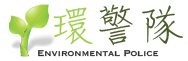
<style>
.page{position:relative;width:188px;height:61px;background:#ffffff}
.page>*{position:absolute;margin:0}
.t1{font:48px "DFYa-W3-WINP-BF";letter-spacing:-0.01em;color:#4b5c29}
.t2{font:48px "DFYa-W3-WINP-BF";letter-spacing:-0.01em;color:#a1cd4b}
.t3{font:11px "Copperplate";letter-spacing:-0.01em;color:#2e2e2e}
</style>
<div class="page">
<p class="t1" style="left:99px;top:4px;width:84px;height:42px">警隊</p>
<p class="t2" style="left:53px;top:7px;width:40px;height:38px">環</p>
<p class="t3" style="left:38px;top:50px;width:121px;height:7px">Environmental Police</p>
</div>
